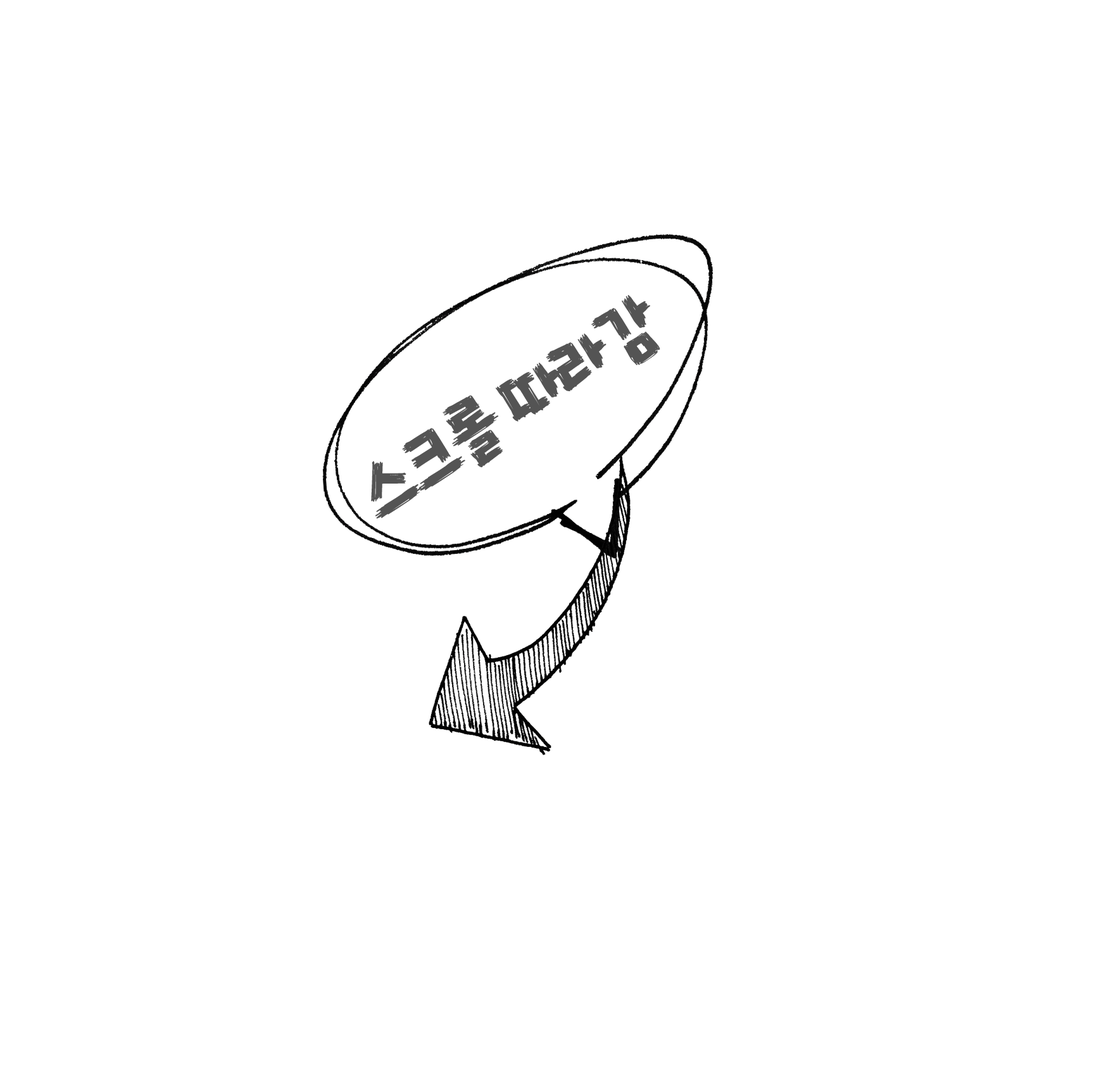
<style>
.page{position:relative;width:1094px;height:1090px;background:#ffffff}
.page>*{position:absolute;margin:0}
.t1{font:70.4px "TTYeonpilsketchR";letter-spacing:-0.08em;color:#545454}
</style>
<div class="page">
<p class="t1" style="left:371px;top:295px;width:289px;height:223px;rotate:-33deg">스크롤 따라감</p>
</div>
